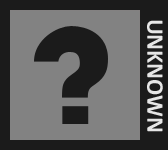
<style>
.page{position:relative;width:168px;height:150px;background:#828282}
.page>*{position:absolute;margin:0}
.t1{font:24px "Calibri-Bold";color:#e6e6e6}
</style>
<div class="page">
<p class="t1" style="left:147px;top:20px;width:16px;height:112px;rotate:90deg">UNKNOWN</p>
</div>
